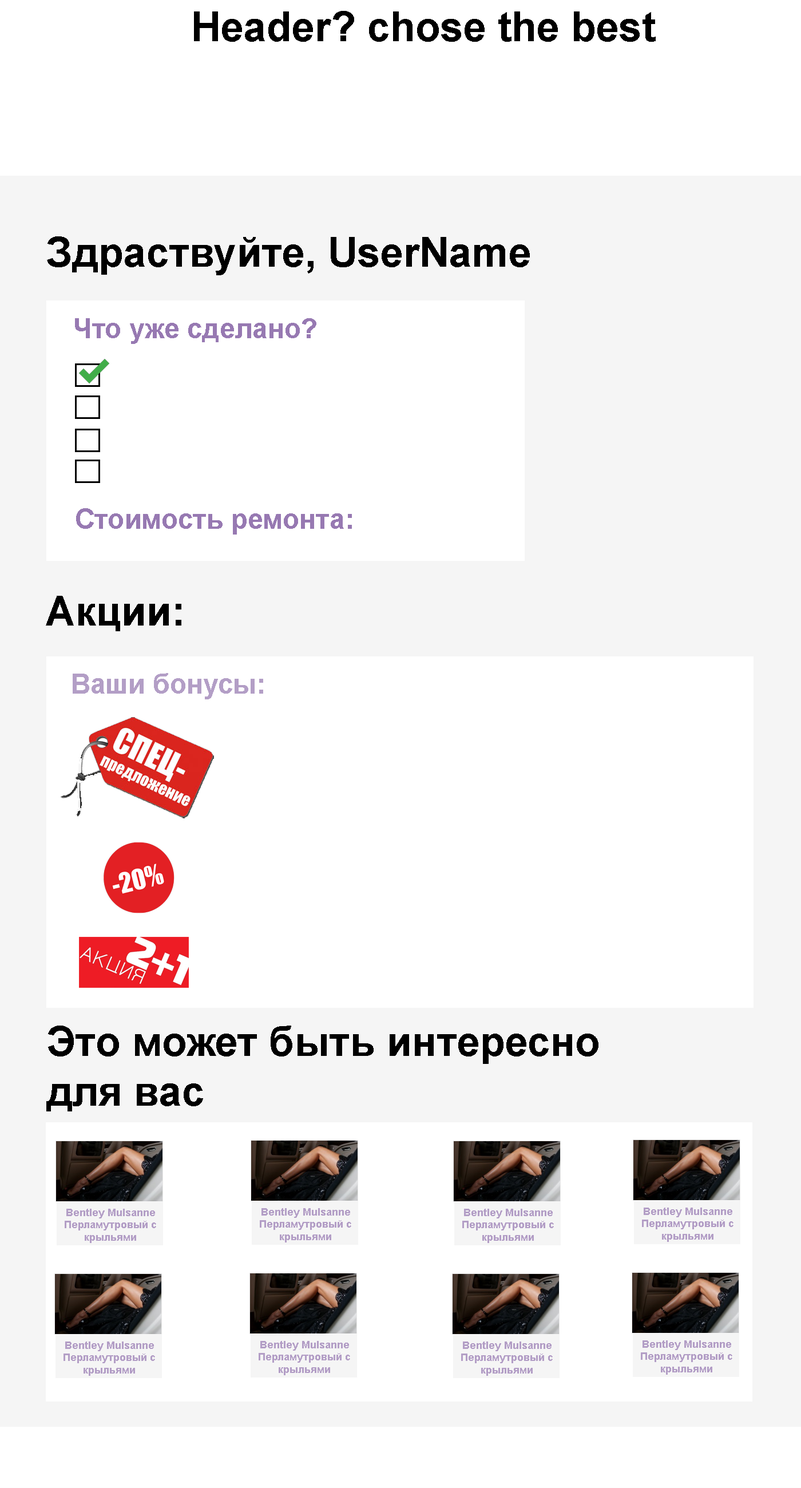
<style>
.page{position:relative;width:801px;height:1488px;background:#ffffff}
.page>*{position:absolute;margin:0}
.t1{font:41.2px "Arial-BoldMT";color:#000000}
.t2{font:27.5px "Arial-BoldMT";color:#9779b2}
.t3{font:27.5px "Arial-BoldMT";color:#b39ec6}
.t4{font:10.3px "Arial-BoldMT";color:#b39ec6}
</style>
<div class="page">
<p class="t1" style="left:194px;top:11px;width:462px;height:31px">Header? chose the best</p>
<p class="t1" style="left:47px;top:236px;width:483px;height:39px">Здраствуйте, UserName</p>
<p class="t2" style="left:75px;top:318px;width:242px;height:26px">Что уже сделано?</p>
<p class="t2" style="left:76px;top:508px;width:276px;height:27px">Стоимость ремонта:</p>
<p class="t1" style="left:46px;top:596px;width:135px;height:35px">Акции:</p>
<p class="t3" style="left:73px;top:673px;width:190px;height:26px">Ваши бонусы:</p>
<p class="t1" style="left:46px;top:1026px;width:553px;height:86px">Это может быть интересно <br>для вас</p>
<p class="t4" style="left:65px;top:1209px;width:91px;height:34px;text-align:center">Bentley Mulsanne Перламутровый с крыльями</p>
<p class="t4" style="left:260px;top:1208px;width:91px;height:35px;text-align:center">Bentley Mulsanne Перламутровый с крыльями</p>
<p class="t4" style="left:462px;top:1209px;width:92px;height:34px;text-align:center">Bentley Mulsanne Перламутровый с крыльями</p>
<p class="t4" style="left:642px;top:1208px;width:92px;height:34px;text-align:center">Bentley Mulsanne Перламутровый с крыльями</p>
<p class="t4" style="left:64px;top:1342px;width:91px;height:34px;text-align:center">Bentley Mulsanne Перламутровый с крыльями</p>
<p class="t4" style="left:259px;top:1341px;width:91px;height:34px;text-align:center">Bentley Mulsanne Перламутровый с крыльями</p>
<p class="t4" style="left:461px;top:1342px;width:92px;height:34px;text-align:center">Bentley Mulsanne Перламутровый с крыльями</p>
<p class="t4" style="left:641px;top:1340px;width:92px;height:35px;text-align:center">Bentley Mulsanne Перламутровый с крыльями</p>
</div>
